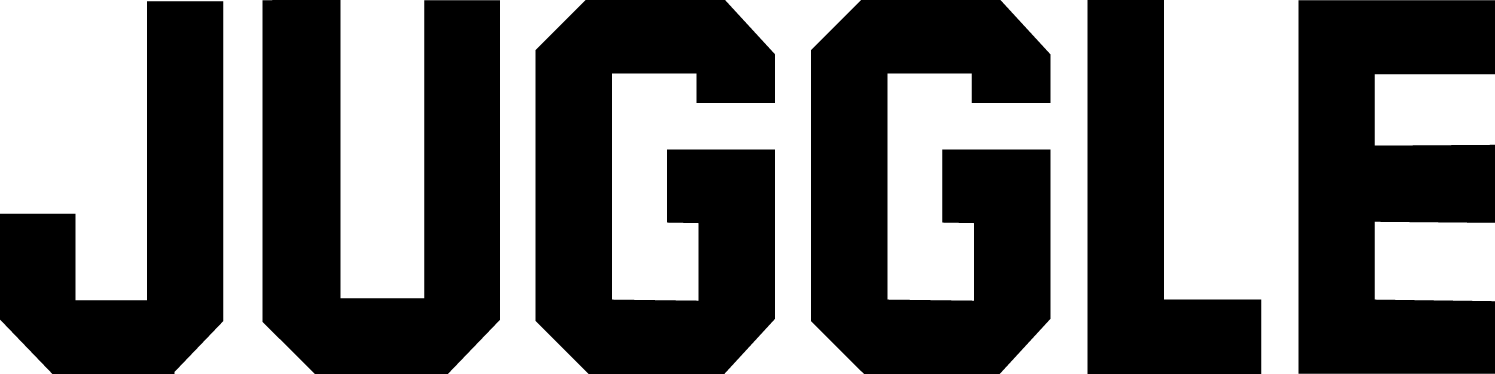
<style>
.page{position:relative;width:1495px;height:374px;background:#000000}
.page>*{position:absolute;margin:0}
.t1{font:534.5px "AdidasHalfBlock2016";letter-spacing:0.02em;color:#000000}
</style>
<div class="page">
<p class="t1" style="left:0px;top:0px;width:1495px;height:375px">JugglE</p>
</div>
